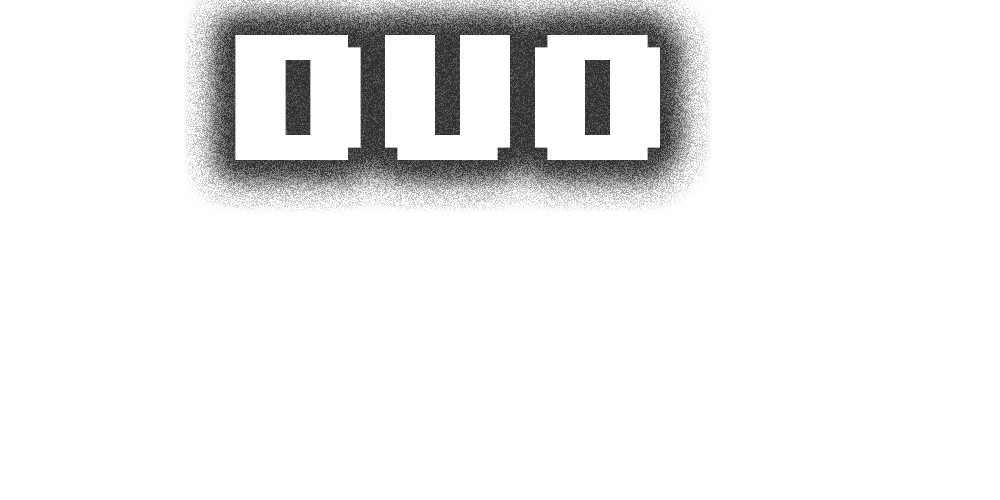
<style>
.page{position:relative;width:1000px;height:500px;background:#ffffff}
.page>*{position:absolute;margin:0}
.t1{font:150px "8BITWONDERNominal";color:#ffffff}
</style>
<div class="page">
<p class="t1" style="left:235px;top:35px;width:425px;height:125px">Duo</p>
</div>
